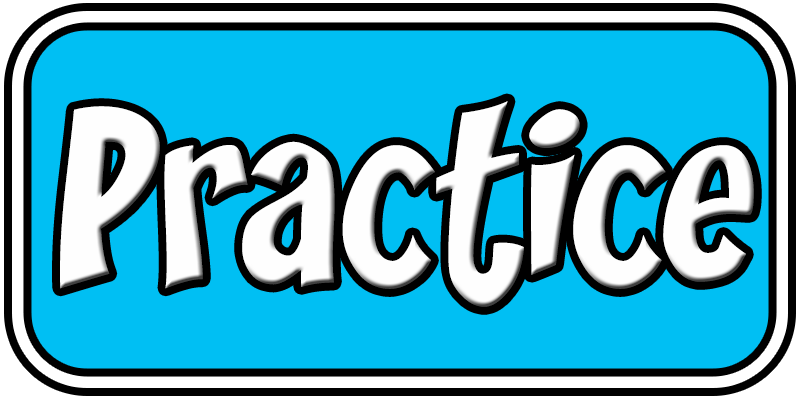
<style>
.page{position:relative;width:800px;height:400px;background:#00bff3}
.page>*{position:absolute;margin:0}
.t1{font:224px "Yikes";color:#fefefe}
</style>
<div class="page">
<p class="t1" style="left:60px;top:101px;width:694px;height:206px">Practice</p>
</div>
